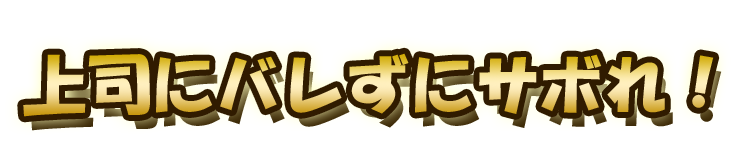
<style>
.page{position:relative;width:750px;height:161px;background:#ffffff}
.page>*{position:absolute;margin:0}
.t1{font:64.8px "HGSoeiKakupoptai"}
</style>
<div class="page">
<p class="t1" style="left:23px;top:53px;width:691px;height:64px">上司にバレずにサボれ！</p>
</div>
